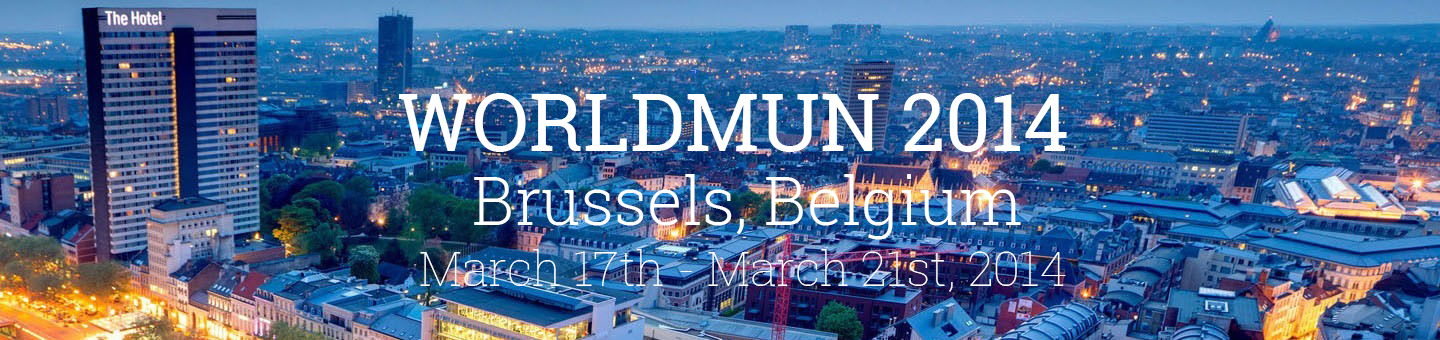
<style>
.page{position:relative;width:1440px;height:340px}
.page>*{position:absolute;margin:0}
.t1{font:80px "RobotoSlab-Regular";color:#ffffff}
.t2{font:65.6px "RobotoSlab-Light";color:#ffffff}
.t3{font:47.9px "RobotoSlab-Thin";color:#ffffff}
</style>
<div class="page">
<p class="t1" style="left:399px;top:93px;width:668px;height:59px">WORLDMUN 2014</p>
<p class="t2" style="left:474px;top:174px;width:547px;height:66px">Brussels, Belgium</p>
<p class="t3" style="left:420px;top:249px;width:646px;height:43px">March 17th - March 21st, 2014</p>
</div>
